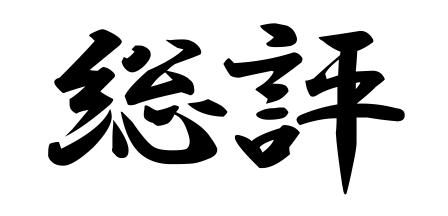
<style>
.page{position:relative;width:448px;height:216px;background:#ffffff}
.page>*{position:absolute;margin:0}
.t1{font:195.8px "HGSGyoshotai";letter-spacing:-0.1em;color:#000000}
</style>
<div class="page">
<p class="t1" style="left:48px;top:23px;width:357px;height:172px">総評</p>
</div>
